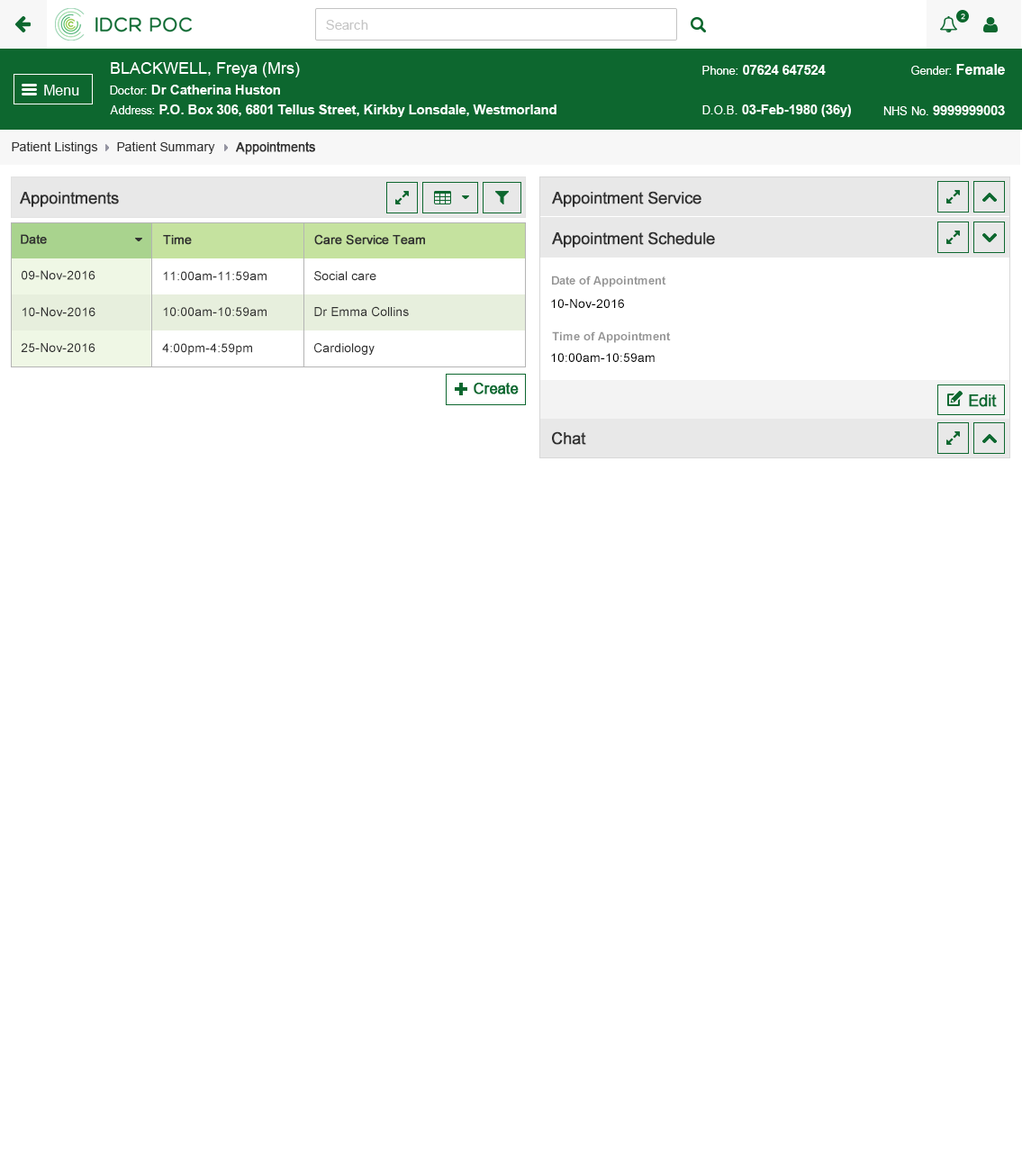
<style>
.page{position:relative;width:1022px;height:1167px;background:#ffffff}
.page>*{position:absolute;margin:0}
.t1{font:12.6px "ArialMT";color:#313131}
.t2{font:12.6px "ArialMT";color:#313131;font-weight:bold}
.t3{font:16.2px "ArialMT";color:#303030;font-weight:bold}
.t4{font:12.6px "ArialMT";color:#303030;font-weight:bold}
.t5{font:12.6px "ArialMT";color:#303030}
.t6{font:11.7px "Arial-BoldMT";color:#959595}
.t7{font:12.6px "ArialMT";color:#000000}
</style>
<div class="page">
<p class="t1" style="left:12px;top:141px;width:86px;height:13px">Patient Listings</p>
<p class="t1" style="left:117px;top:141px;width:98px;height:13px">Patient Summary</p>
<p class="t2" style="left:236px;top:141px;width:79px;height:14px">Appointments</p>
<p class="t3" style="left:20px;top:192px;width:99px;height:15px">Appointments</p>
<p class="t3" style="left:552px;top:191px;width:149px;height:16px">Appointment Service</p>
<p class="t3" style="left:552px;top:231px;width:163px;height:17px">Appointment Schedule</p>
<p class="t4" style="left:21px;top:234px;width:26px;height:10px">Date</p>
<p class="t4" style="left:163px;top:235px;width:29px;height:10px">Time</p>
<p class="t4" style="left:314px;top:234px;width:111px;height:11px">Care Service Team</p>
<p class="t5" style="left:22px;top:270px;width:73px;height:10px">09-Nov-2016</p>
<p class="t5" style="left:163px;top:271px;width:104px;height:10px">11:00am-11:59am</p>
<p class="t5" style="left:314px;top:271px;width:62px;height:10px">Social care</p>
<p class="t6" style="left:552px;top:276px;width:114px;height:11px">Date of Appointment</p>
<p class="t7" style="left:551px;top:299px;width:73px;height:9px">10-Nov-2016</p>
<p class="t5" style="left:23px;top:307px;width:72px;height:10px">10-Nov-2016</p>
<p class="t5" style="left:163px;top:307px;width:104px;height:9px">10:00am-10:59am</p>
<p class="t5" style="left:314px;top:306px;width:95px;height:11px">Dr Emma Collins</p>
<p class="t6" style="left:552px;top:331px;width:119px;height:12px">Time of Appointment</p>
<p class="t5" style="left:21px;top:343px;width:74px;height:9px">25-Nov-2016</p>
<p class="t5" style="left:162px;top:343px;width:90px;height:12px">4:00pm-4:59pm</p>
<p class="t5" style="left:314px;top:343px;width:61px;height:12px">Cardiology</p>
<p class="t7" style="left:551px;top:353px;width:104px;height:9px">10:00am-10:59am</p>
<p class="t3" style="left:552px;top:431px;width:34px;height:14px">Chat</p>
</div>
